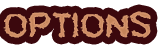
<style>
.page{position:relative;width:160px;height:50px;background:#3b080d}
.page>*{position:absolute;margin:0}
.t1{font:34px "TOBACCO";color:#c4845a;font-weight:bold}
</style>
<div class="page">
<p class="t1" style="left:3px;top:11px;width:148px;height:27px">OPTIONS</p>
</div>
